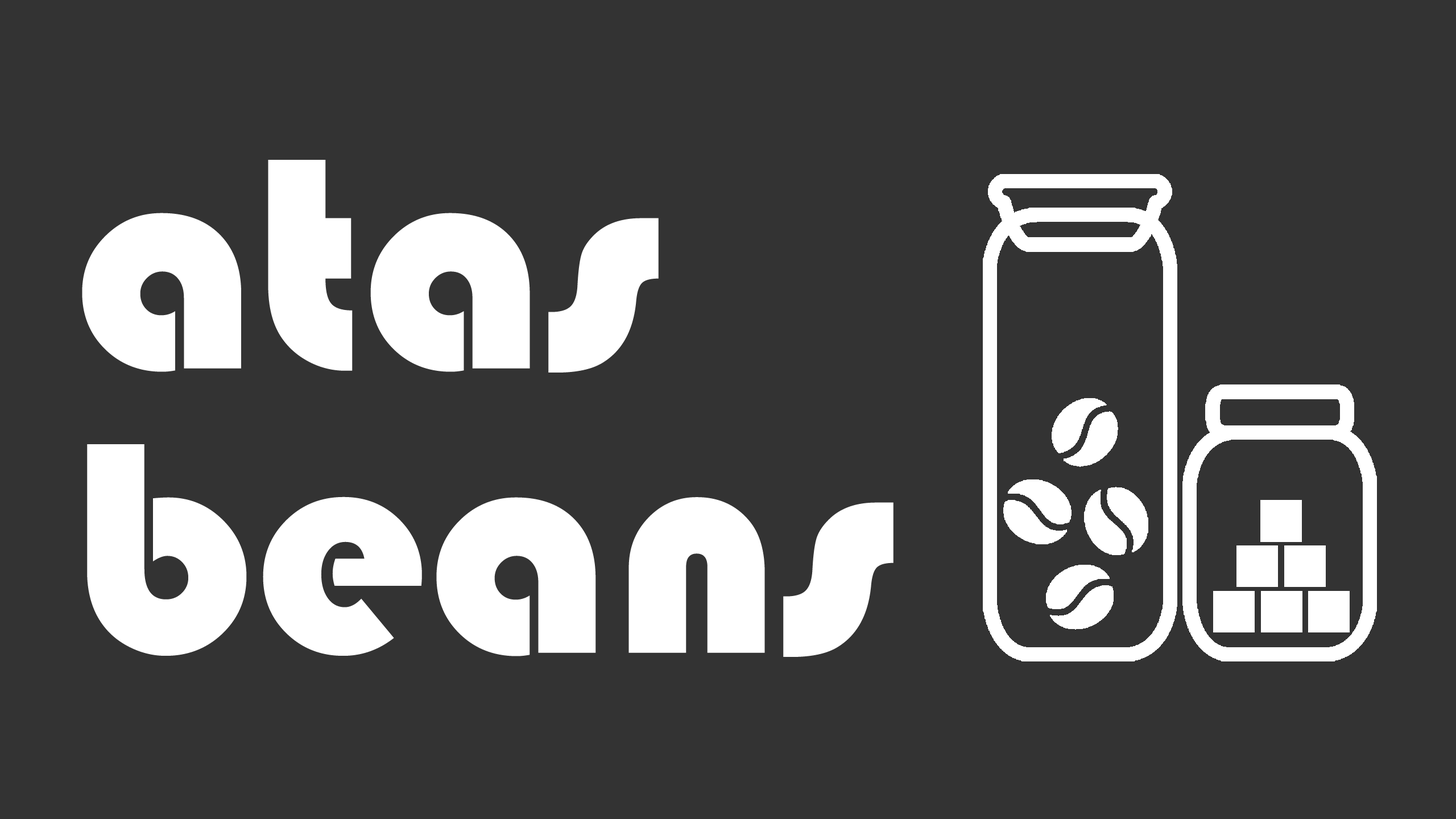
<style>
.page{position:relative;width:1456px;height:819px;background:#333333}
.page>*{position:absolute;margin:0}
.t1{font:312.8px/284.4px "Bauhaus93";color:#ffffff}
</style>
<div class="page">
<p class="t1" style="left:82px;top:160px;width:811px;height:497px">atas<br>beans</p>
</div>
